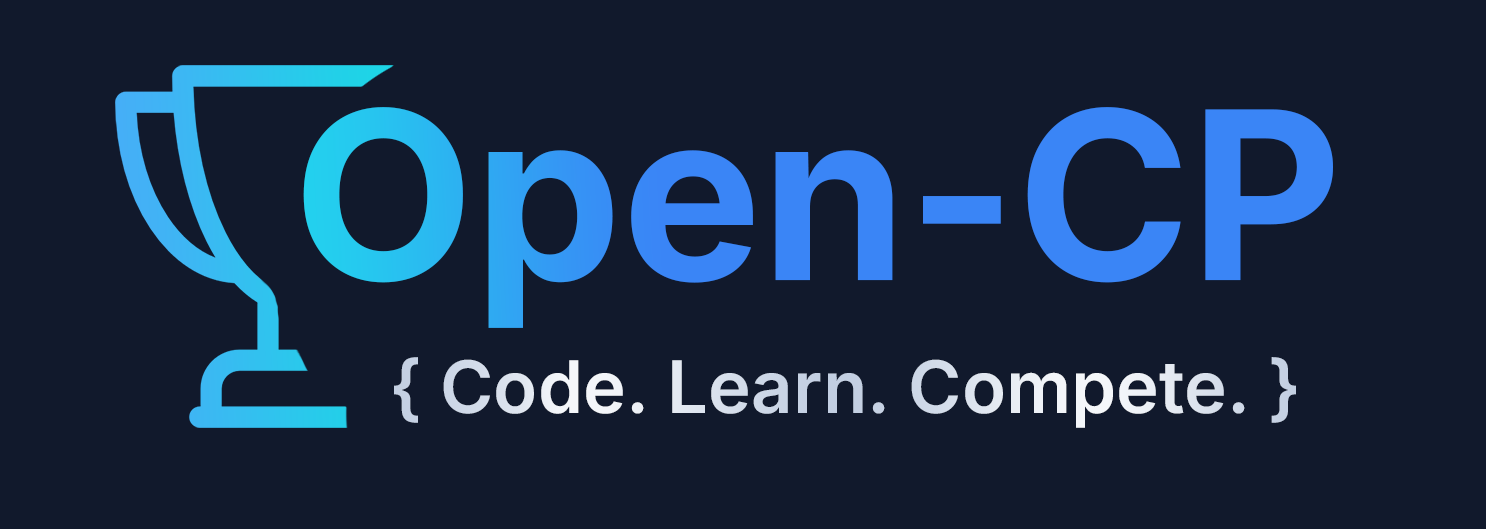
<style>
.page{position:relative;width:1486px;height:529px;background:#11192c}
.page>*{position:absolute;margin:0}
.t1{font:234.4px "Inter-Bold";color:#3a85f6}
.t2{font:72.4px "Inter-SemiBold"}
</style>
<div class="page">
<p class="t1" style="left:303px;top:107px;width:1030px;height:221px">Open-CP</p>
<p class="t2" style="left:394px;top:357px;width:902px;height:71px">{ Code. Learn. Compete. }</p>
</div>
